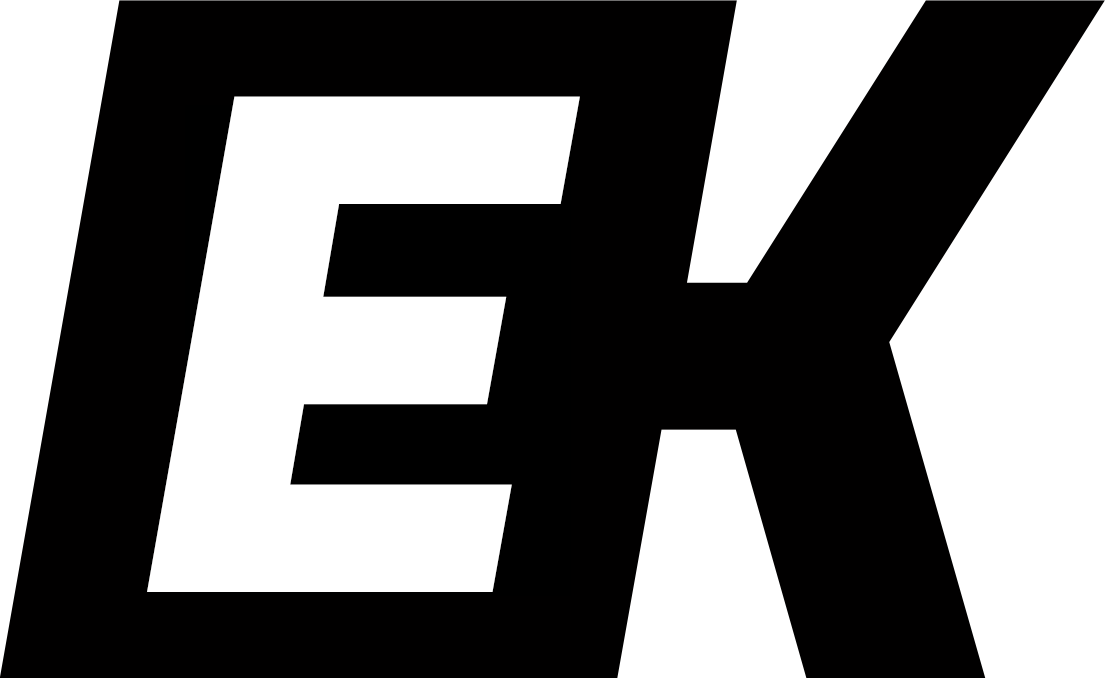
<style>
.page{position:relative;width:1105px;height:678px;background:#010000}
.page>*{position:absolute;margin:0}
.t1{font:941.4px "FugazOne-Regular";letter-spacing:-0.14em;color:#010000}
.t2{font:687.8px "FugazOne-Regular";letter-spacing:-0.14em;color:#ffffff}
</style>
<div class="page">
<p class="t1" style="left:0px;top:0px;width:1105px;height:678px">EK</p>
<p class="t2" style="left:147px;top:96px;width:433px;height:496px">E</p>
</div>
